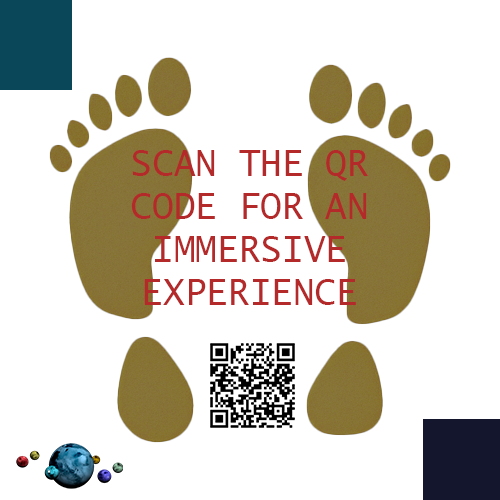
<style>
.page{position:relative;width:500px;height:500px;background:#ffffff}
.page>*{position:absolute;margin:0}
.t1{font:36px "LucidaSans-Typewriter";color:#b42a2a;text-transform:uppercase}
</style>
<div class="page">
<p class="t1" style="left:131px;top:150px;width:237px;height:155px;text-align:center">Scan the QR code for an immersive experience</p>
</div>
